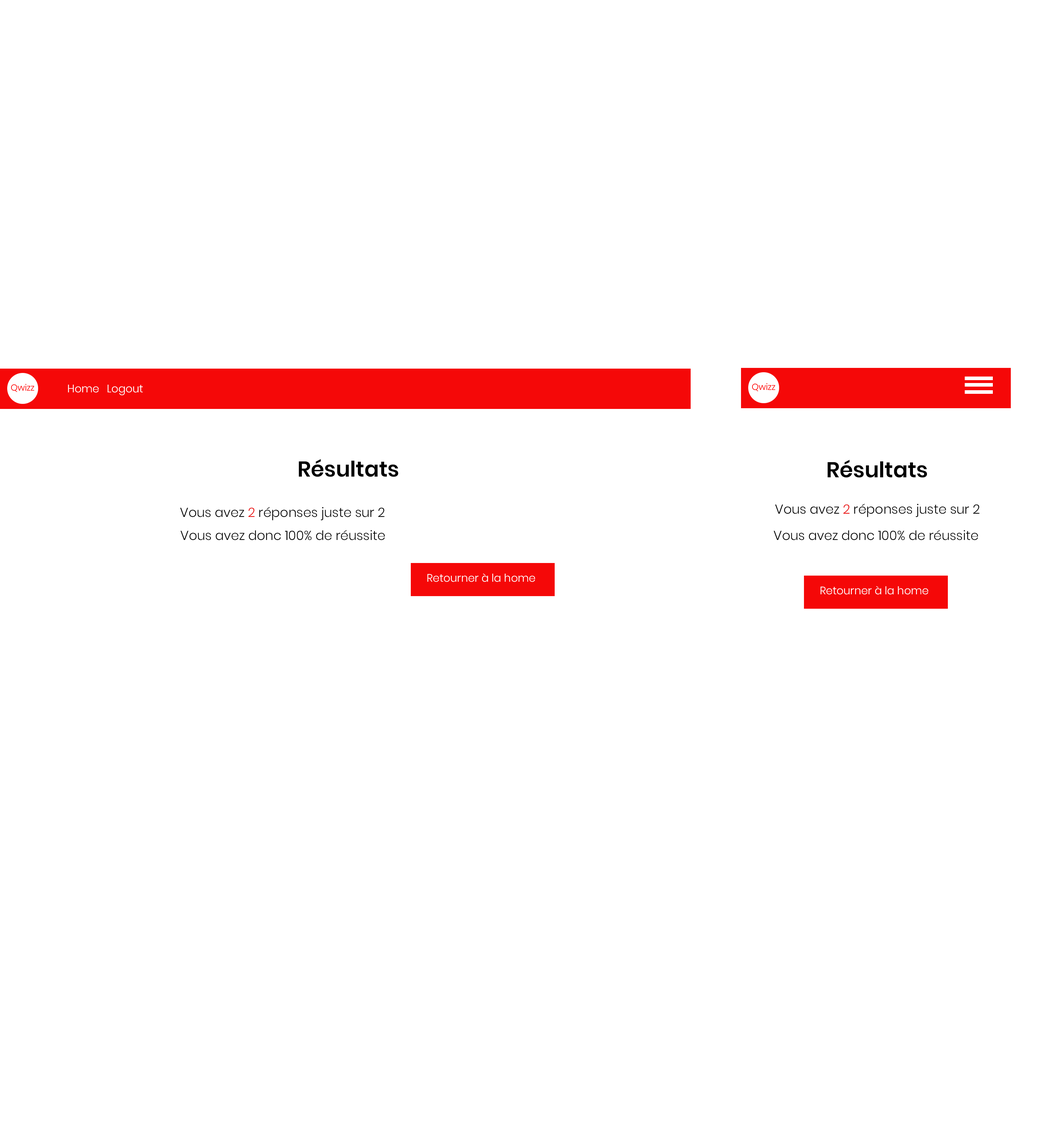
<style>
.page{position:relative;width:1059px;height:1126px;background:#ffffff}
.page>*{position:absolute;margin:0}
.t1{font:10.8px "Poppins-Light";color:#ffffff}
.t2{font:21.6px "Poppins-SemiBold";color:#000000}
.t3{font:13px "Poppins-Light";color:#000000}
.t4{font:13px "Poppins-Light";color:#ea0e0e}
</style>
<div class="page">
<p class="t1" style="left:68px;top:384px;width:31px;height:9px">Home</p>
<p class="t1" style="left:108px;top:384px;width:35px;height:11px">Logout</p>
<p class="t2" style="left:299px;top:459px;width:99px;height:18px">Résultats</p>
<p class="t2" style="left:828px;top:460px;width:99px;height:18px">Résultats</p>
<p class="t3" style="left:180px;top:507px;width:205px;height:13px">Vous avez <span class="t4">2</span> réponses juste sur 2</p>
<p class="t3" style="left:775px;top:503px;width:205px;height:14px">Vous avez <span class="t4">2</span> réponses juste sur 2</p>
<p class="t3" style="left:180px;top:530px;width:205px;height:10px">Vous avez donc 100% de réussite</p>
<p class="t3" style="left:774px;top:530px;width:204px;height:10px">Vous avez donc 100% de réussite</p>
<p class="t1" style="left:427px;top:573px;width:108px;height:9px">Retourner à la home</p>
</div>
